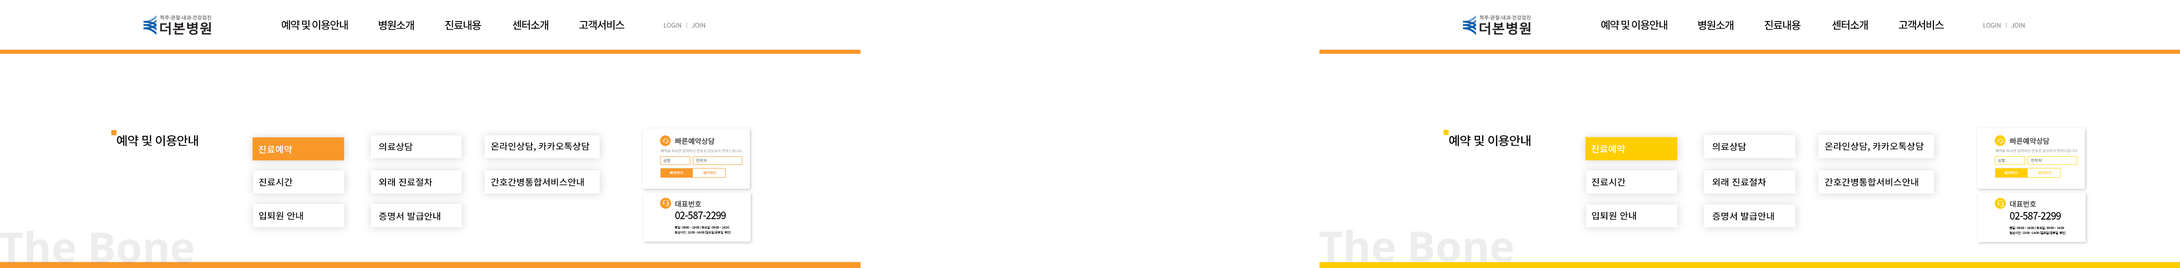
<style>
.page{position:relative;width:2180px;height:268px;background:#ffffff}
.page>*{position:absolute;margin:0}
.t1{font:10.8px "NotoSansKR-Medium";letter-spacing:-0.075em;color:#000000}
.t2{font:6.3px "NotoSansKR-Regular";color:#6b6b6b;scale:0.97 1}
.t3{font:12.1px "NotoSansKR-Medium";letter-spacing:-0.05em;color:#000000;text-transform:uppercase;scale:1.03 1}
.t4{font:7.2px "NotoSansKR-Bold";color:#454545;text-transform:uppercase}
.t5{font:12.2px "NotoSansKR-Medium";letter-spacing:-0.05em;color:#000000;text-transform:uppercase;scale:1.03 1}
.t6{font:9px "NotoSansKR-Medium";color:#ffffff;text-transform:uppercase;scale:1.03 1}
.t7{font:9px "NotoSansKR-Medium";color:#000000;text-transform:uppercase;scale:1.03 1}
.t8{font:3.6px "NotoSansKR-Medium";text-transform:uppercase}
.t9{font:3.7px "NotoSansKR-Medium";text-transform:uppercase}
.t10{font:4px "NotoSansKR-Medium";text-transform:uppercase}
.t11{font:4.1px "NotoSansKR-Medium";text-transform:uppercase}
.t12{font:3.7px "NotoSansKR-Bold";color:#ffffff;text-transform:uppercase}
.t13{font:3.7px "NotoSansKR-Bold";color:#f89828;text-transform:uppercase}
.t14{font:3.7px "NotoSansKR-Bold";color:#ffce00;text-transform:uppercase}
.t15{font:10.3px "NotoSansKR-Medium";letter-spacing:-0.05em;color:#000000;scale:0.93 1}
.t16{font:10.4px "NotoSansKR-Medium";letter-spacing:-0.05em;color:#000000;scale:0.93 1}
.t17{font:3px/4.9px "NotoSansKR-Regular";letter-spacing:-0.025em;color:#000000}
</style>
<div class="page">
<p class="t1" style="left:281px;top:20px;width:67px;height:10px">예약 및 이용안내</p>
<p class="t1" style="left:379px;top:20px;width:35px;height:10px">병원소개</p>
<p class="t1" style="left:445px;top:20px;width:36px;height:10px">진료내용</p>
<p class="t1" style="left:513px;top:20px;width:35px;height:10px">센터소개</p>
<p class="t1" style="left:579px;top:20px;width:45px;height:10px">고객서비스</p>
<p class="t2" style="left:664px;top:23px;width:17px;height:5px">LOGIN</p>
<p class="t2" style="left:691px;top:23px;width:14px;height:5px">JOIN</p>
<p class="t1" style="left:1601px;top:20px;width:66px;height:10px">예약 및 이용안내</p>
<p class="t1" style="left:1698px;top:20px;width:35px;height:10px">병원소개</p>
<p class="t1" style="left:1764px;top:20px;width:37px;height:10px">진료내용</p>
<p class="t1" style="left:1832px;top:20px;width:35px;height:10px">센터소개</p>
<p class="t1" style="left:1898px;top:20px;width:45px;height:10px">고객서비스</p>
<p class="t2" style="left:1983px;top:23px;width:17px;height:5px">LOGIN</p>
<p class="t2" style="left:2011px;top:23px;width:13px;height:5px">JOIN</p>
<p class="t3" style="left:117px;top:135px;width:81px;height:12px">예약 및 이용안내</p>
<p class="t4" style="left:675px;top:138px;width:39px;height:7px">빠른예약상담</p>
<p class="t5" style="left:1449px;top:135px;width:81px;height:12px">예약 및 이용안내</p>
<p class="t4" style="left:2009px;top:138px;width:40px;height:7px">빠른예약상담</p>
<p class="t6" style="left:258px;top:145px;width:34px;height:9px">진료예약</p>
<p class="t7" style="left:379px;top:143px;width:34px;height:8px">의료상담</p>
<p class="t7" style="left:491px;top:142px;width:98px;height:9px">온라인상담, 카카오톡상담</p>
<p class="t8" style="left:661px;top:149px;width:82px;height:4px">예약을 하시면 입력하신 번호로 담당자가 연락드립니다.</p>
<p class="t6" style="left:1591px;top:145px;width:34px;height:8px">진료예약</p>
<p class="t7" style="left:1712px;top:143px;width:34px;height:8px">의료상담</p>
<p class="t7" style="left:1825px;top:142px;width:98px;height:9px">온라인상담, 카카오톡상담</p>
<p class="t9" style="left:1995px;top:149px;width:82px;height:4px">예약을 하시면 입력하신 번호로 담당자가 연락드립니다.</p>
<p class="t10" style="left:663px;top:159px;width:7px;height:4px">성함</p>
<p class="t10" style="left:696px;top:159px;width:11px;height:4px">연락처</p>
<p class="t11" style="left:1997px;top:159px;width:8px;height:4px">성함</p>
<p class="t11" style="left:2030px;top:159px;width:11px;height:4px">연락처</p>
<p class="t12" style="left:669px;top:171px;width:14px;height:4px">예약하기</p>
<p class="t13" style="left:703px;top:171px;width:13px;height:4px">예약확인</p>
<p class="t12" style="left:2004px;top:171px;width:13px;height:4px">예약하기</p>
<p class="t14" style="left:2038px;top:171px;width:13px;height:4px">예약확인</p>
<p class="t7" style="left:259px;top:178px;width:34px;height:8px">진료시간</p>
<p class="t7" style="left:379px;top:178px;width:53px;height:8px">외래 진료절차</p>
<p class="t7" style="left:491px;top:178px;width:93px;height:8px">간호간병통합서비스안내</p>
<p class="t7" style="left:1591px;top:178px;width:34px;height:8px">진료시간</p>
<p class="t7" style="left:1712px;top:178px;width:54px;height:8px">외래 진료절차</p>
<p class="t7" style="left:1825px;top:178px;width:93px;height:8px">간호간병통합서비스안내</p>
<p class="t4" style="left:675px;top:200px;width:26px;height:7px">대표번호</p>
<p class="t4" style="left:2010px;top:200px;width:26px;height:7px">대표번호</p>
<p class="t7" style="left:259px;top:212px;width:44px;height:8px">입퇴원 안내</p>
<p class="t7" style="left:379px;top:212px;width:61px;height:8px">증명서 발급안내</p>
<p class="t15" style="left:675px;top:212px;width:51px;height:7px">02-587-2299</p>
<p class="t7" style="left:1592px;top:212px;width:44px;height:8px">입퇴원 안내</p>
<p class="t7" style="left:1712px;top:212px;width:62px;height:8px">증명서 발급안내</p>
<p class="t16" style="left:2009px;top:212px;width:51px;height:8px">02-587-2299</p>
<p class="t17" style="left:674px;top:226px;width:57px;height:8px">평일 : 09:00 ~ 18:00 / 토요일 : 09:00 ~ 14:00<br>점심시간 : 13:00 ~14:00 (일요일/공휴일  휴진)</p>
<p class="t17" style="left:2009px;top:226px;width:56px;height:8px">평일 : 09:00 ~ 18:00 / 토요일 : 09:00 ~ 14:00<br>점심시간 : 13:00 ~14:00 (일요일/공휴일  휴진)</p>
</div>
